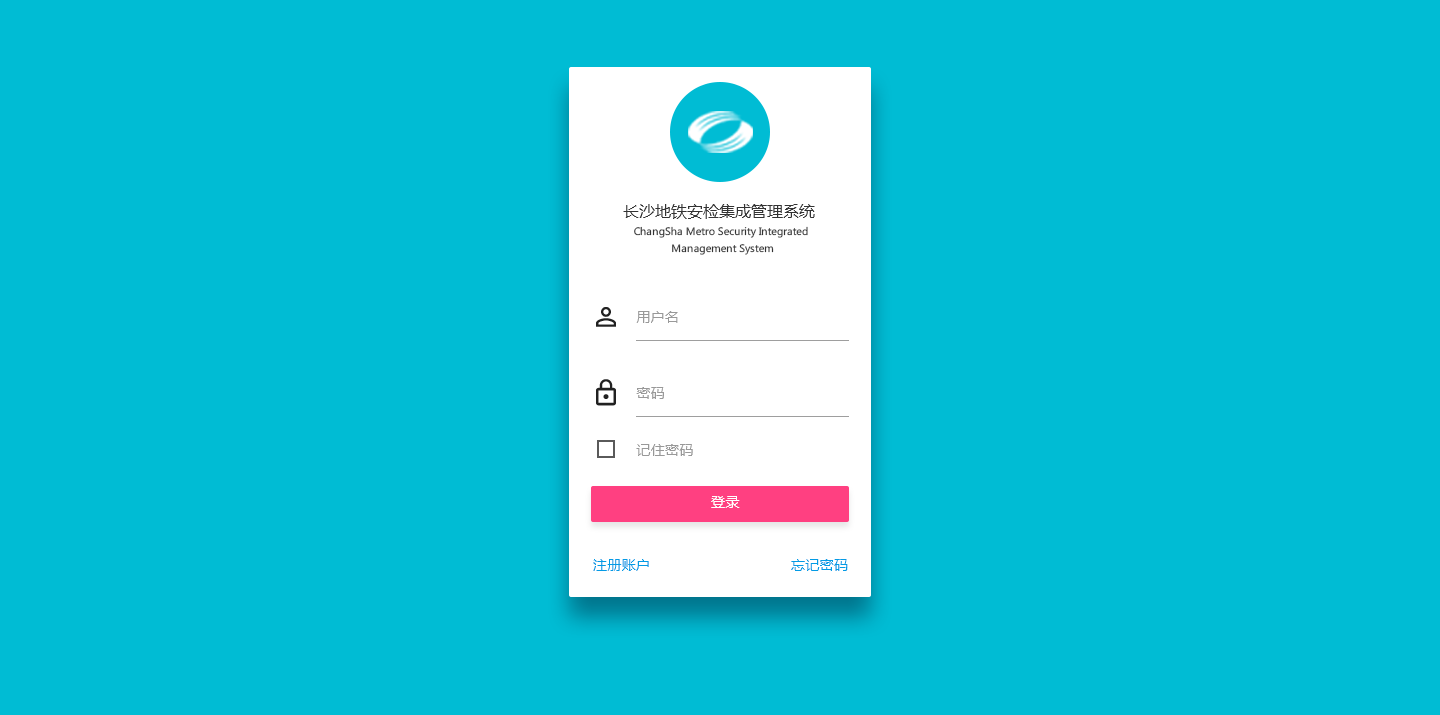
<style>
.page{position:relative;width:1440px;height:715px;background:#00bcd4}
.page>*{position:absolute;margin:0}
.t1{font:16px "MicrosoftYaHei";color:#333333}
.t2{font:10px/16.1px "MicrosoftYaHei";color:#333333}
.t3{font:14px "MicrosoftYaHei";letter-spacing:0.026em;color:#999999}
.t4{font:14px "MicrosoftYaHei";letter-spacing:0.026em;color:#ffffff}
.t5{font:14px "MicrosoftYaHei";letter-spacing:0.026em;color:#039be5}
</style>
<div class="page">
<p class="t1" style="left:623px;top:204px;width:192px;height:15px">长沙地铁安检集成管理系统</p>
<p class="t2" style="left:634px;top:226px;width:174px;height:29px;text-align:center">ChangSha Metro Security Integrated <br>Management System</p>
<p class="t3" style="left:636px;top:311px;width:42px;height:12px">用户名</p>
<p class="t3" style="left:636px;top:387px;width:28px;height:12px">密码</p>
<p class="t3" style="left:636px;top:444px;width:57px;height:12px">记住密码</p>
<p class="t4" style="left:711px;top:496px;width:29px;height:12px">登录</p>
<p class="t5" style="left:593px;top:559px;width:56px;height:12px">注册账户</p>
<p class="t5" style="left:791px;top:559px;width:57px;height:12px">忘记密码</p>
</div>
